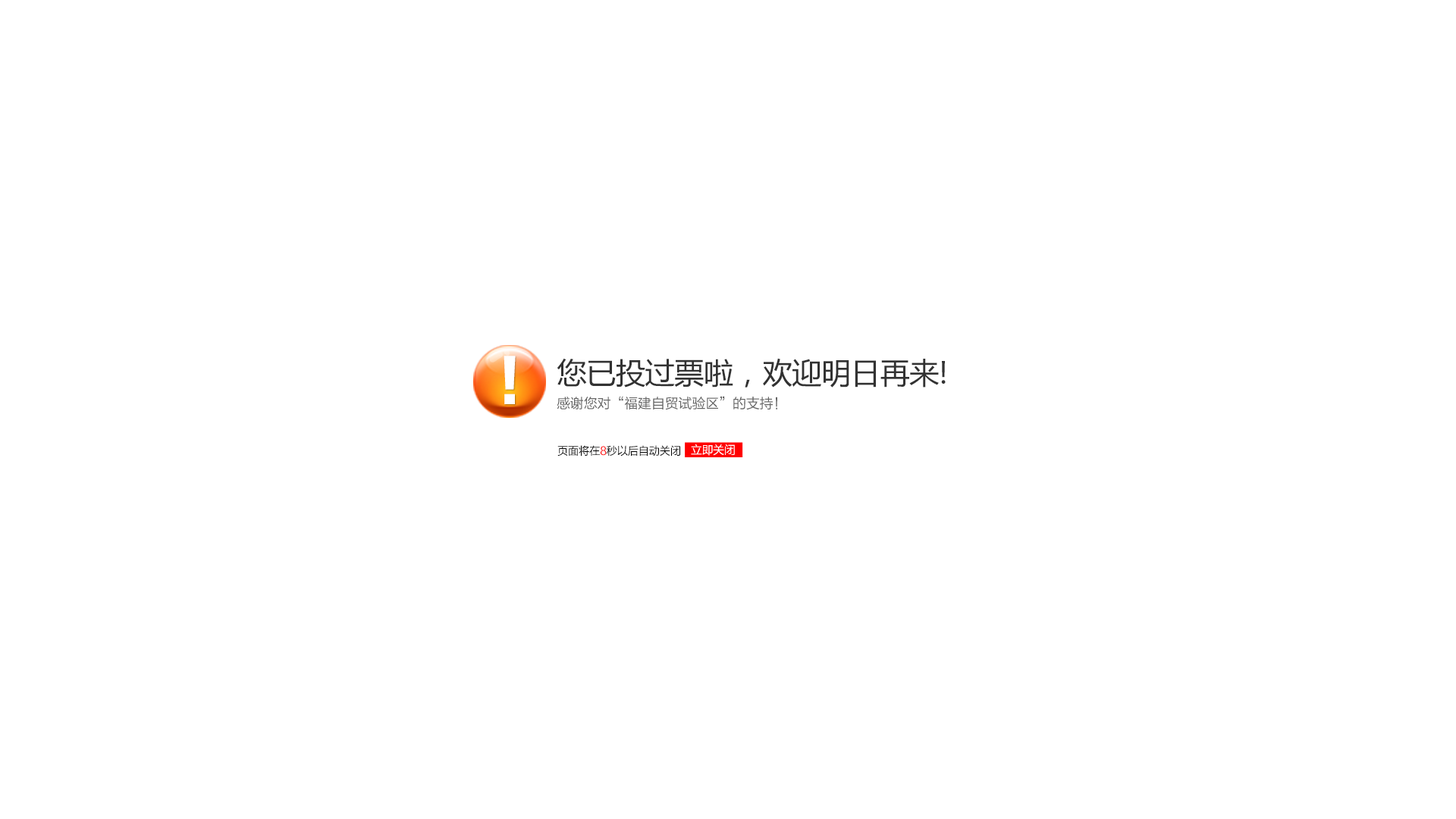
<style>
.page{position:relative;width:1456px;height:819px;background:#ffffff}
.page>*{position:absolute;margin:0}
.t1{font:56.3px "FZLTTHK--GBK1-0";color:#ffffff;scale:0.95 1}
.t2{font:29.6px "MicrosoftYaHei";letter-spacing:-0.01em;color:#323232}
.t3{font:13.9px "FZLTHK--GBK1-0";letter-spacing:-0.01em;color:#646464}
.t4{font:11.1px "FZLTHK--GBK1-0";letter-spacing:-0.01em;color:#000000;scale:0.97 1}
.t5{font:11.1px "FZLTHK--GBK1-0";letter-spacing:-0.01em;color:#ff0000;scale:0.97 1}
.t6{font:11.1px "MicrosoftYaHei";letter-spacing:-0.01em;color:#ffffff}
</style>
<div class="page">
<p class="t1" style="left:504px;top:356px;width:12px;height:48px">！</p>
<p class="t2" style="left:557px;top:358px;width:389px;height:30px">您已投过票啦，欢迎明日再来!</p>
<p class="t3" style="left:557px;top:396px;width:220px;height:14px">感谢您对“福建自贸试验区”的支持！</p>
<p class="t4" style="left:557px;top:445px;width:123px;height:12px">页面将在<span class="t5">8</span>秒以后自动关闭</p>
<p class="t6" style="left:691px;top:444px;width:44px;height:12px">立即关闭</p>
</div>
